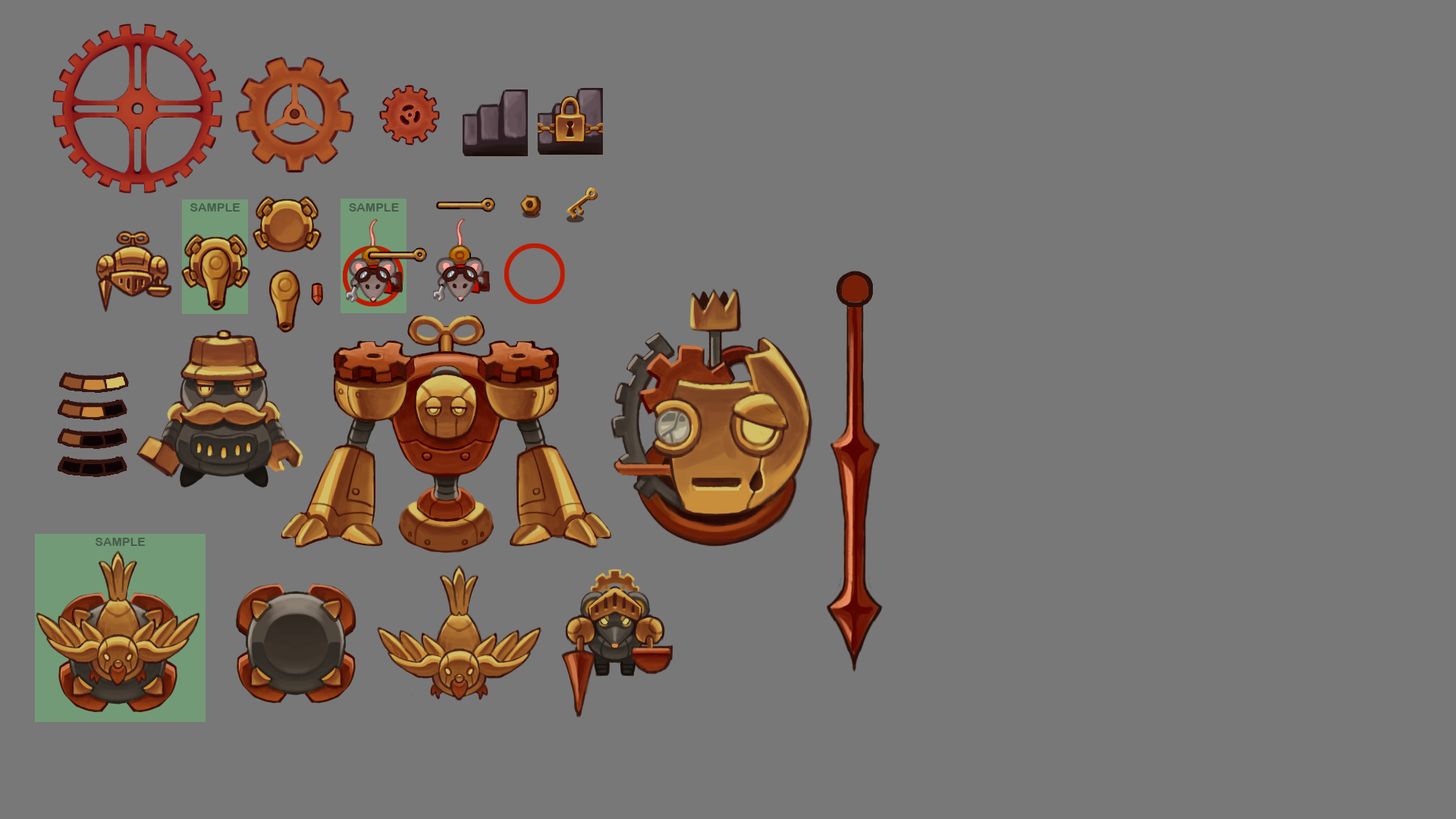
<style>
.page{position:relative;width:1456px;height:819px;background:#787878}
.page>*{position:absolute;margin:0}
.t1{font:12.1px "ArialRoundedMTBold";color:#485e4b}
</style>
<div class="page">
<p class="t1" style="left:190px;top:203px;width:50px;height:9px">SAMPLE</p>
<p class="t1" style="left:349px;top:203px;width:50px;height:9px">SAMPLE</p>
<p class="t1" style="left:96px;top:538px;width:50px;height:8px">SAMPLE</p>
</div>
